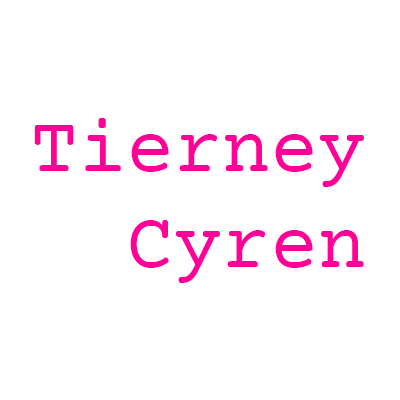
<style>
.page{position:relative;width:400px;height:400px;background:#ffffff}
.page>*{position:absolute;margin:0}
.t1{font:80px "CourierPrime-Regular";color:#ff0099}
</style>
<div class="page">
<p class="t1" style="left:34px;top:118px;width:330px;height:165px;text-align:right">Tierney<br>Cyren</p>
</div>
